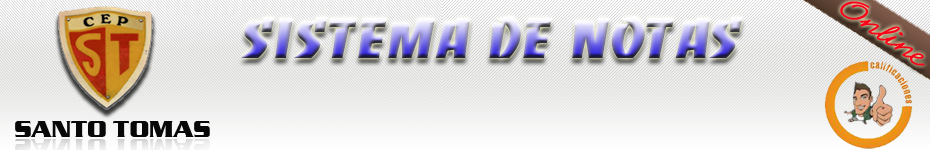
<style>
.page{position:relative;width:930px;height:150px}
.page>*{position:absolute;margin:0}
.t1{font:33px "AbrazoScriptSSiNormal";color:#fc021a;scale:1.38 1}
.t2{font:60.8px "BancoDi";scale:1.13 1}
.t3{font:23.5px "SerpentineD-Bold";color:#080808;scale:1.03 1}
</style>
<div class="page">
<p class="t1" style="left:840px;top:1px;width:85px;height:65px;rotate:34deg">Online</p>
<p class="t2" style="left:241px;top:16px;width:502px;height:42px">SISTEMA DE NOTAS</p>
<p class="t3" style="left:15px;top:121px;width:195px;height:16px">SANTO TOMAS</p>
</div>
